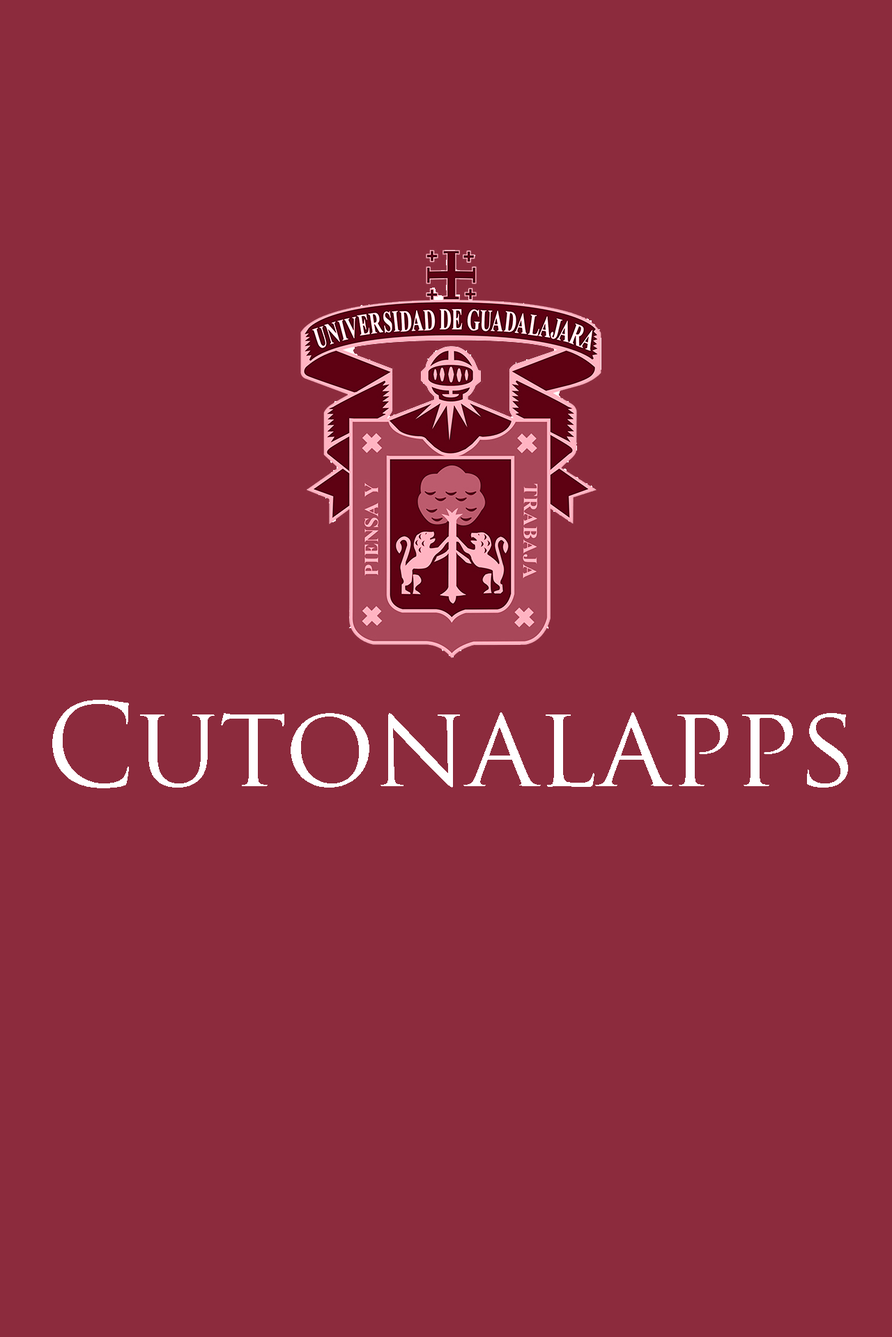
<style>
.page{position:relative;width:892px;height:1337px;background:#8c2b3d}
.page>*{position:absolute;margin:0}
.t1{font:112.7px "TrajanPro-Regular";color:#ffffff}
</style>
<div class="page">
<p class="t1" style="left:52px;top:700px;width:796px;height:89px">Cutonalapps</p>
</div>
